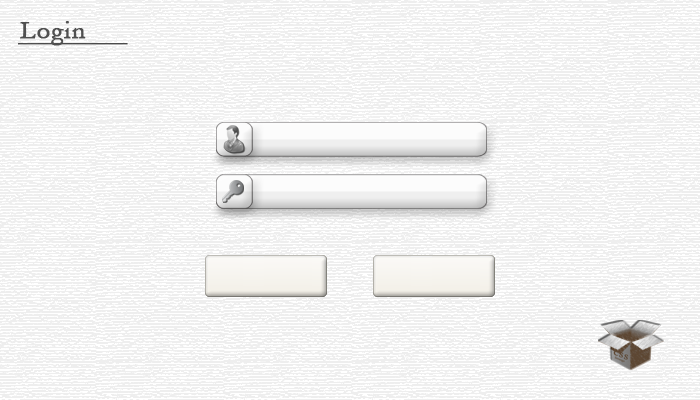
<style>
.page{position:relative;width:700px;height:400px;background:#eeeeee}
.page>*{position:absolute;margin:0}
.t1{font:26.4px "Garamond";letter-spacing:0.02em;color:#505050;font-weight:bold}
</style>
<div class="page">
<p class="t1" style="left:20px;top:21px;width:66px;height:25px">Login</p>
</div>
